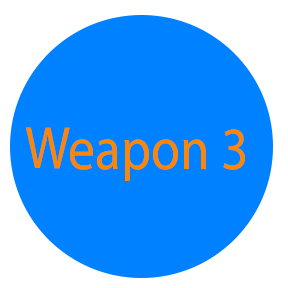
<style>
.page{position:relative;width:288px;height:288px;background:#0081ff}
.page>*{position:absolute;margin:0}
.t1{font:60px "MyriadPro-Regular";color:#ff8700;scale:0.89 1}
</style>
<div class="page">
<p class="t1" style="left:26px;top:127px;width:219px;height:54px">Weapon 3</p>
</div>
